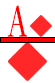
<style>
.page{position:relative;width:55px;height:83px;background:#ffffff}
.page>*{position:absolute;margin:0}
.t1{font:42px "DFKaiShu-SB-Estd-BF";color:#ff0000}
</style>
<div class="page">
<p class="t1" style="left:7px;top:5px;width:20px;height:32px">A</p>
</div>
